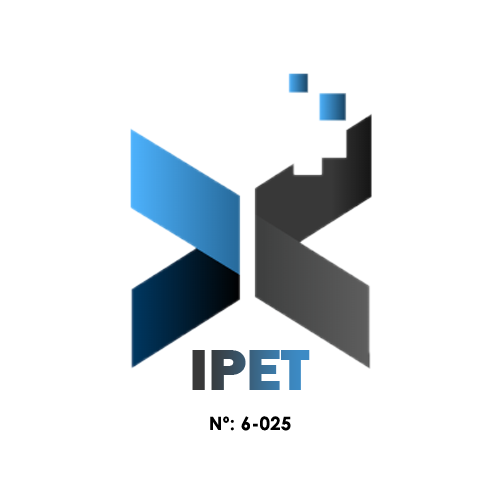
<style>
.page{position:relative;width:500px;height:500px;background:#ffffff}
.page>*{position:absolute;margin:0}
.t1{font:60px "FranklinGothic-Heavy"}
.t2{font:18.4px "CenturyGothic-Bold";letter-spacing:0.02em;color:#000000}
</style>
<div class="page">
<p class="t1" style="left:192px;top:350px;width:118px;height:40px">IPET</p>
<p class="t2" style="left:210px;top:416px;width:81px;height:15px">Nº: 6-025</p>
</div>
